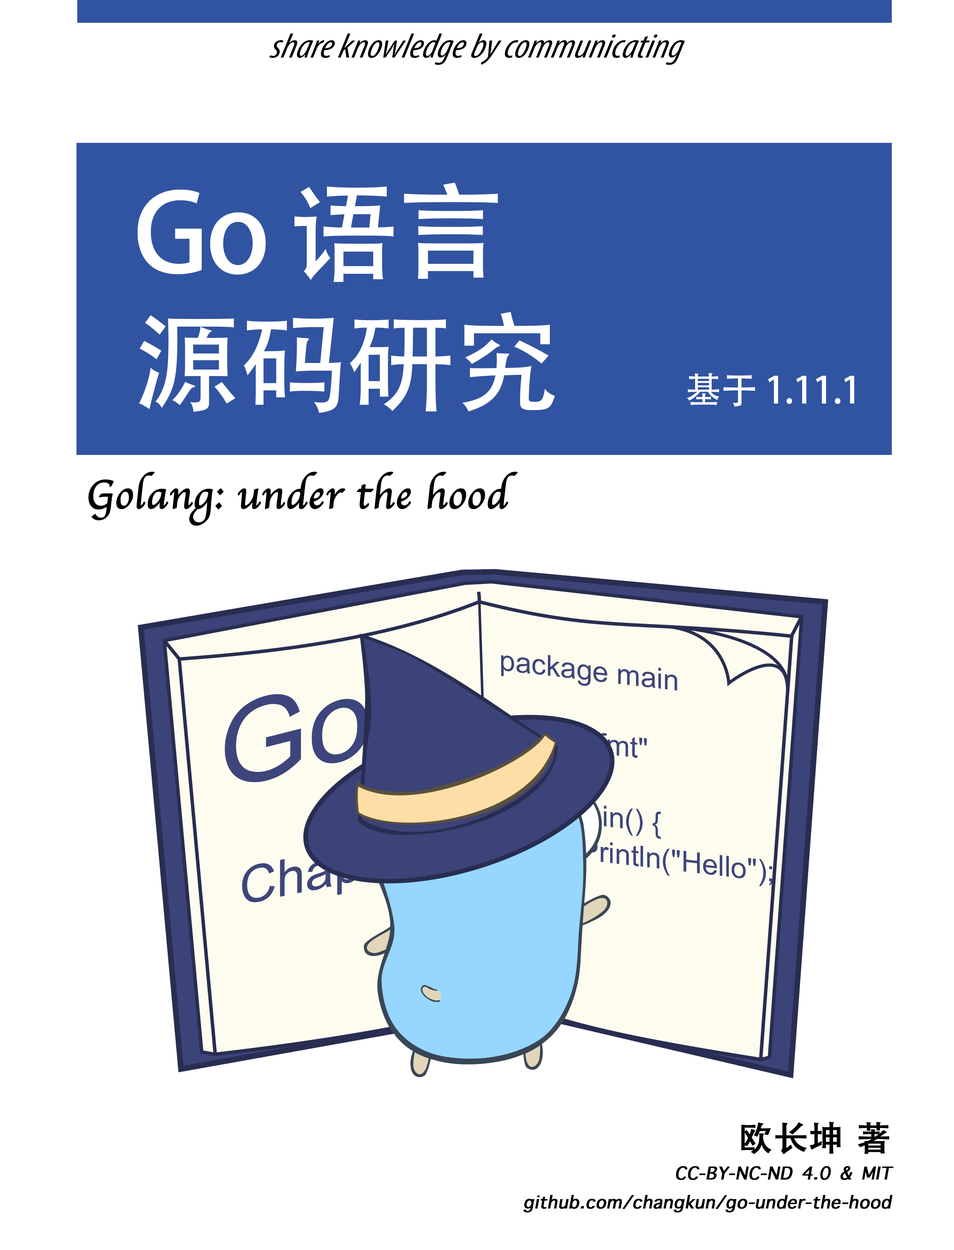
<style>
.page{position:relative;width:954px;height:1250px;background:#ffffff}
.page>*{position:absolute;margin:0}
.t1{font:34.8px "MyriadPro-CondIt";color:#000000;font-style:italic;scale:1.11 1}
.t2{font:108.5px "AdobeHeitiStd-Regular";letter-spacing:-0.02em;color:#ffffff}
.t3{font:36.7px "AdobeHeitiStd-Regular";letter-spacing:-0.02em;color:#ffffff}
.t4{font:41.7px "Apple-Chancery";color:#000000;font-weight:bold}
.t5{font:23.9px "AppleSymbols";color:#000000;font-weight:bold;font-style:italic}
.t6{font:34.4px "AppleSymbols";color:#000000;font-weight:bold;font-style:italic}
.t7{font:34.4px "AdobeHeitiStd-Regular";color:#000000;font-weight:bold}
</style>
<div class="page">
<p class="t1" style="left:269px;top:34px;width:416px;height:31px">share knowledge by communicating</p>
<p class="t2" style="left:138px;top:182px;width:716px;height:231px">Go 语言<br>源码研究      <span class="t3">基于 1.11.1</span></p>
<p class="t4" style="left:88px;top:472px;width:430px;height:54px">Golang: under the hood</p>
<p class="t5" style="left:523px;top:1122px;width:370px;height:91px;text-align:right"><span class="t6"><br></span><span class="t7">欧长坤 著<br></span>CC-BY-NC-ND 4.0 &amp; MIT<br>github.com/changkun/go-under-the-hood</p>
</div>
